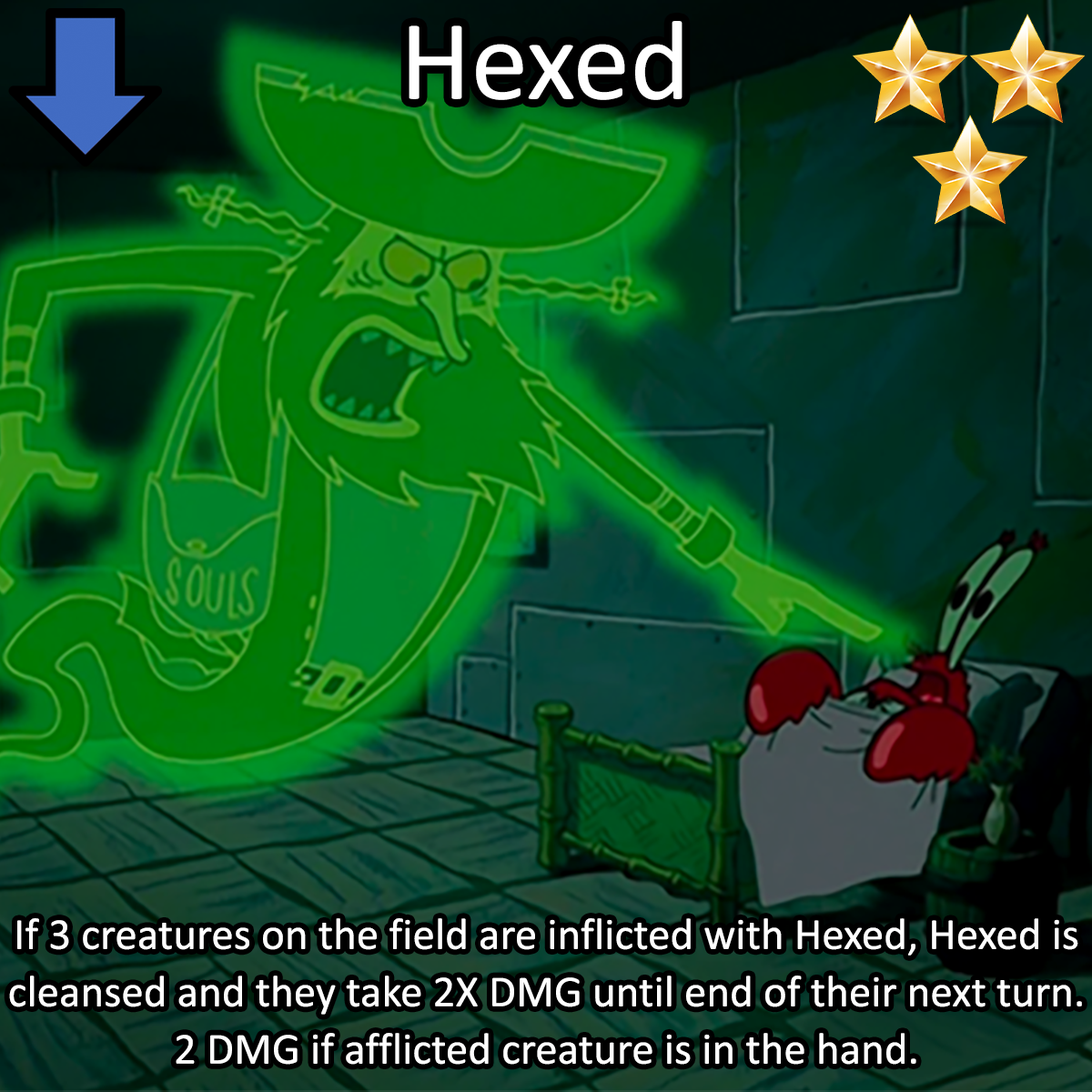
<style>
.page{position:relative;width:1092px;height:1092px}
.page>*{position:absolute;margin:0}
.t1{font:196.6px "Calibri";color:#ffffff}
.t2{font:44.6px/57.3px "Calibri";color:#ffffff}
</style>
<div class="page">
<p class="t1" style="left:409px;top:21px;width:273px;height:79px">Hexed</p>
<p class="t2" style="left:9px;top:918px;width:1073px;height:147px;text-align:center">If 3 creatures on the field are inflicted with Hexed, Hexed is cleansed and they take 2X DMG until end of their next turn.<br>2 DMG if afflicted creature is in the hand.</p>
</div>
